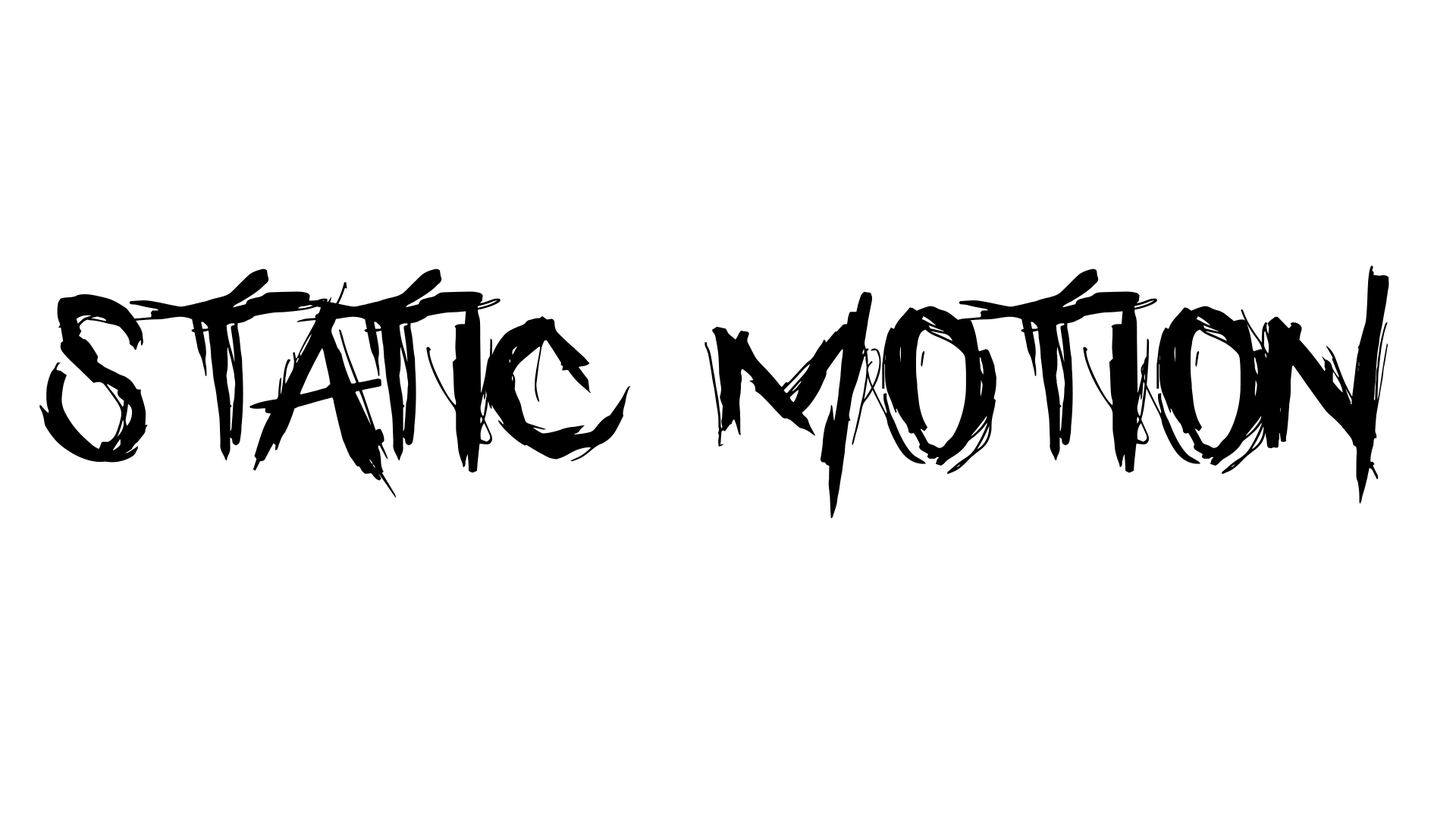
<style>
.page{position:relative;width:1456px;height:819px;background:#ffffff}
.page>*{position:absolute;margin:0}
.t1{font:284.4px "WhoasksSatan";color:#000000;scale:1.2 1}
</style>
<div class="page">
<p class="t1" style="left:39px;top:265px;width:1350px;height:254px">Static MOTION</p>
</div>
